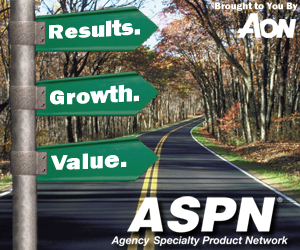
<style>
.page{position:relative;width:300px;height:250px}
.page>*{position:absolute;margin:0}
.t1{font:10px "FranklinGothic-Heavy";color:#ffffff}
.t2{font:24px "FranklinGothic-Heavy";color:#ffffff}
.t3{font:25px "FranklinGothic-Heavy";color:#ffffff}
.t4{font:26px "FranklinGothic-Heavy";color:#ffffff}
</style>
<div class="page">
<p class="t1" style="left:215px;top:2px;width:83px;height:9px">Brought to You By</p>
<p class="t2" style="left:49px;top:19px;width:91px;height:20px">Results.</p>
<p class="t3" style="left:50px;top:84px;width:89px;height:21px">Growth.</p>
<p class="t4" style="left:51px;top:153px;width:76px;height:17px">Value.</p>
</div>
